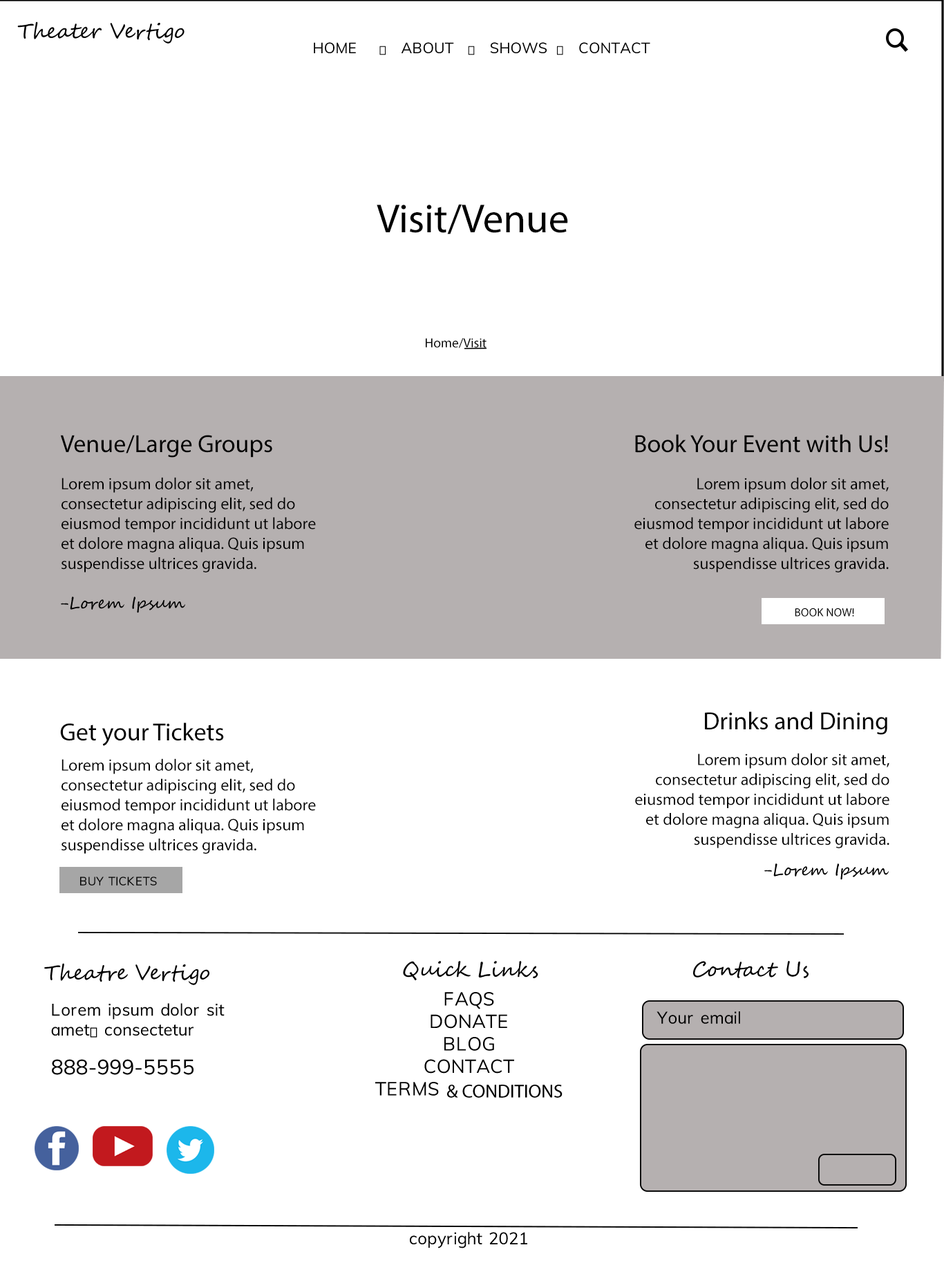
<style>
.page{position:relative;width:944px;height:1263px;background:#ffffff}
.page>*{position:absolute;margin:0}
.t1{font:20.7px "SegoeScript";color:#000000}
.t2{font:40.8px "MyriadPro-Regular";color:#000000}
.t3{font:13.4px "MyriadPro-Regular";color:#000000}
.t4{font:24.9px "MyriadPro-Regular";color:#000000}
.t5{font:16.6px "MyriadPro-Regular";color:#000000}
.t6{font:16.6px "SegoeScript";color:#000000}
.t7{font:11.8px "MyriadPro-Regular";color:#000000}
</style>
<div class="page">
<p class="t1" style="left:17px;top:21px;width:168px;height:23px">Theater Vertigo</p>
<p class="t2" style="left:377px;top:204px;width:191px;height:30px">Visit/Venue</p>
<p class="t3" style="left:426px;top:338px;width:61px;height:10px">Home/Visit</p>
<p class="t4" style="left:60px;top:435px;width:212px;height:23px">Venue/Large Groups</p>
<p class="t4" style="left:635px;top:434px;width:253px;height:19px">Book Your Event with Us!</p>
<p class="t5" style="left:62px;top:477px;width:254px;height:95px">Lorem ipsum dolor sit amet, consectetur adipiscing elit, sed do eiusmod tempor incididunt ut labore et dolore magna aliqua. Quis ipsum suspendisse ultrices gravida.</p>
<p class="t5" style="left:635px;top:477px;width:254px;height:95px;text-align:right">Lorem ipsum dolor sit amet, consectetur adipiscing elit, sed do eiusmod tempor incididunt ut labore et dolore magna aliqua. Quis ipsum suspendisse ultrices gravida.</p>
<p class="t6" style="left:61px;top:597px;width:124px;height:16px">-Lorem Ipsum</p>
<p class="t7" style="left:795px;top:608px;width:59px;height:9px">BOOK NOW!</p>
<p class="t4" style="left:705px;top:711px;width:183px;height:24px">Drinks and Dining</p>
<p class="t4" style="left:60px;top:722px;width:164px;height:24px">Get your Tickets</p>
<p class="t5" style="left:62px;top:758px;width:254px;height:96px">Lorem ipsum dolor sit amet, consectetur adipiscing elit, sed do eiusmod tempor incididunt ut labore et dolore magna aliqua. Quis ipsum suspendisse ultrices gravida.</p>
<p class="t5" style="left:635px;top:753px;width:255px;height:95px;text-align:right">Lorem ipsum dolor sit amet, consectetur adipiscing elit, sed do eiusmod tempor incididunt ut labore et dolore magna aliqua. Quis ipsum suspendisse ultrices gravida.</p>
<p class="t6" style="left:764px;top:863px;width:125px;height:17px">-Lorem Ipsum</p>
<p class="t1" style="left:44px;top:963px;width:165px;height:22px">Theatre Vertigo</p>
<p class="t1" style="left:403px;top:961px;width:135px;height:19px">Quick Links</p>
<p class="t1" style="left:693px;top:961px;width:116px;height:17px">Contact Us</p>
</div>
